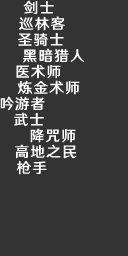
<style>
.page{position:relative;width:128px;height:256px;background:#333333}
.page>*{position:absolute;margin:0}
.t1{font:14.7px/16px "HYWenHei-FEW";letter-spacing:0.08em;color:#ffffff}
</style>
<div class="page">
<p class="t1" style="left:0px;top:0px;width:85px;height:175px">剑士<br>   巡林客<br>   圣骑士<br>    黑暗猎人<br>  医术师<br>   炼金术师<br>吟游者<br>  武士<br>     降咒师<br>  高地之民<br>   枪手</p>
</div>
